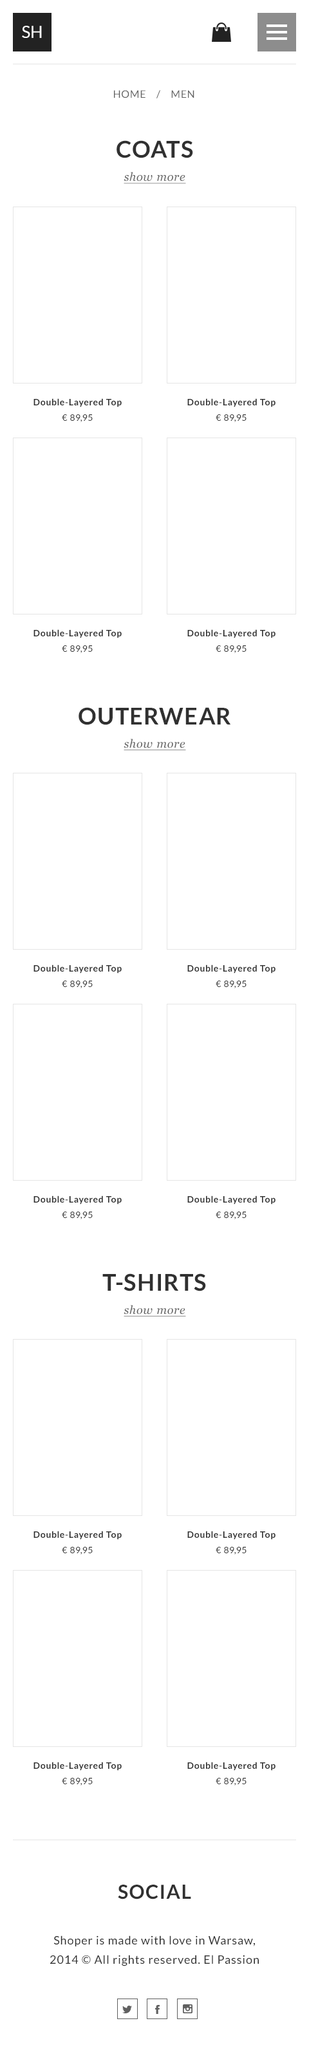
<style>
.page{position:relative;width:309px;height:2059px;background:#ffffff}
.page>*{position:absolute;margin:0}
.t1{font:16.7px "Lato-Regular";color:#ffffff;text-transform:uppercase}
.t2{font:10.3px "Lato-Regular";letter-spacing:0.05em;color:#606060;text-transform:uppercase}
.t3{font:11.6px/23.2px "Georgia-Italic";letter-spacing:0.05em;color:#606060;text-decoration:underline}
.t4{font:23.2px/23.2px "Lato-Bold";letter-spacing:0.05em;color:#303030;text-transform:uppercase}
.t5{font:9px/15.4px "Lato-Bold";letter-spacing:0.05em;color:#303030}
.t6{font:9px/15.4px "Lato-Regular";letter-spacing:0.05em;color:#303030}
.t7{font:19.3px "Lato-Bold";letter-spacing:0.05em;color:#303030;text-transform:uppercase}
.t8{font:11.6px/19.3px "Lato-Regular";letter-spacing:0.05em;color:#303030}
</style>
<div class="page">
<p class="t1" style="left:22px;top:26px;width:20px;height:12px">SH</p>
<p class="t2" style="left:114px;top:90px;width:80px;height:8px">HOME    /    Men</p>
<p class="t3" style="left:116px;top:140px;width:77px;height:44px;text-align:center"><span class="t4">Coats<br></span>show more</p>
<p class="t5" style="left:33px;top:398px;width:89px;height:24px;text-align:center">Double-Layered Top<br><span class="t6">€ 89,95</span></p>
<p class="t5" style="left:187px;top:398px;width:88px;height:24px;text-align:center">Double-Layered Top<br><span class="t6">€ 89,95</span></p>
<p class="t5" style="left:33px;top:629px;width:89px;height:24px;text-align:center">Double-Layered Top<br><span class="t6">€ 89,95</span></p>
<p class="t5" style="left:187px;top:629px;width:88px;height:24px;text-align:center">Double-Layered Top<br><span class="t6">€ 89,95</span></p>
<p class="t4" style="left:78px;top:707px;width:152px;height:43px;text-align:center">Outerwear<br><span class="t3">show more</span></p>
<p class="t5" style="left:33px;top:964px;width:89px;height:24px;text-align:center">Double-Layered Top<br><span class="t6">€ 89,95</span></p>
<p class="t5" style="left:187px;top:964px;width:88px;height:24px;text-align:center">Double-Layered Top<br><span class="t6">€ 89,95</span></p>
<p class="t5" style="left:33px;top:1195px;width:89px;height:24px;text-align:center">Double-Layered Top<br><span class="t6">€ 89,95</span></p>
<p class="t5" style="left:187px;top:1195px;width:88px;height:24px;text-align:center">Double-Layered Top<br><span class="t6">€ 89,95</span></p>
<p class="t3" style="left:102px;top:1273px;width:104px;height:43px;text-align:center"><span class="t4">T-shirts<br></span>show more</p>
<p class="t5" style="left:33px;top:1530px;width:89px;height:24px;text-align:center">Double-Layered Top<br><span class="t6">€ 89,95</span></p>
<p class="t5" style="left:187px;top:1530px;width:88px;height:24px;text-align:center">Double-Layered Top<br><span class="t6">€ 89,95</span></p>
<p class="t5" style="left:33px;top:1761px;width:89px;height:24px;text-align:center">Double-Layered Top<br><span class="t6">€ 89,95</span></p>
<p class="t5" style="left:187px;top:1761px;width:88px;height:24px;text-align:center">Double-Layered Top<br><span class="t6">€ 89,95</span></p>
<p class="t7" style="left:118px;top:1884px;width:73px;height:15px">social</p>
<p class="t8" style="left:50px;top:1935px;width:209px;height:31px;text-align:center">Shoper is made with love in Warsaw,<br>2014 © All rights reserved. El Passion</p>
</div>
